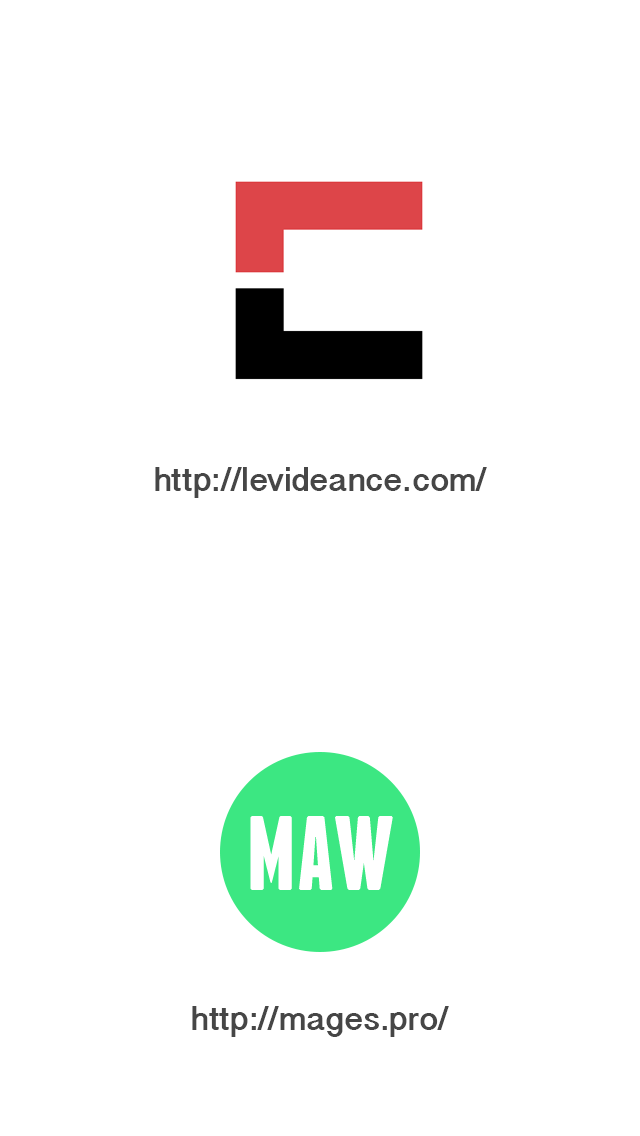
<style>
.page{position:relative;width:640px;height:1136px;background:#ffffff}
.page>*{position:absolute;margin:0}
.t1{font:34px "DevanagariSangamMN-Bold";color:#464646}
</style>
<div class="page">
<p class="t1" style="left:155px;top:467px;width:332px;height:31px">http://levideance.com/</p>
<p class="t1" style="left:192px;top:1006px;width:257px;height:31px">http://mages.pro/</p>
</div>
